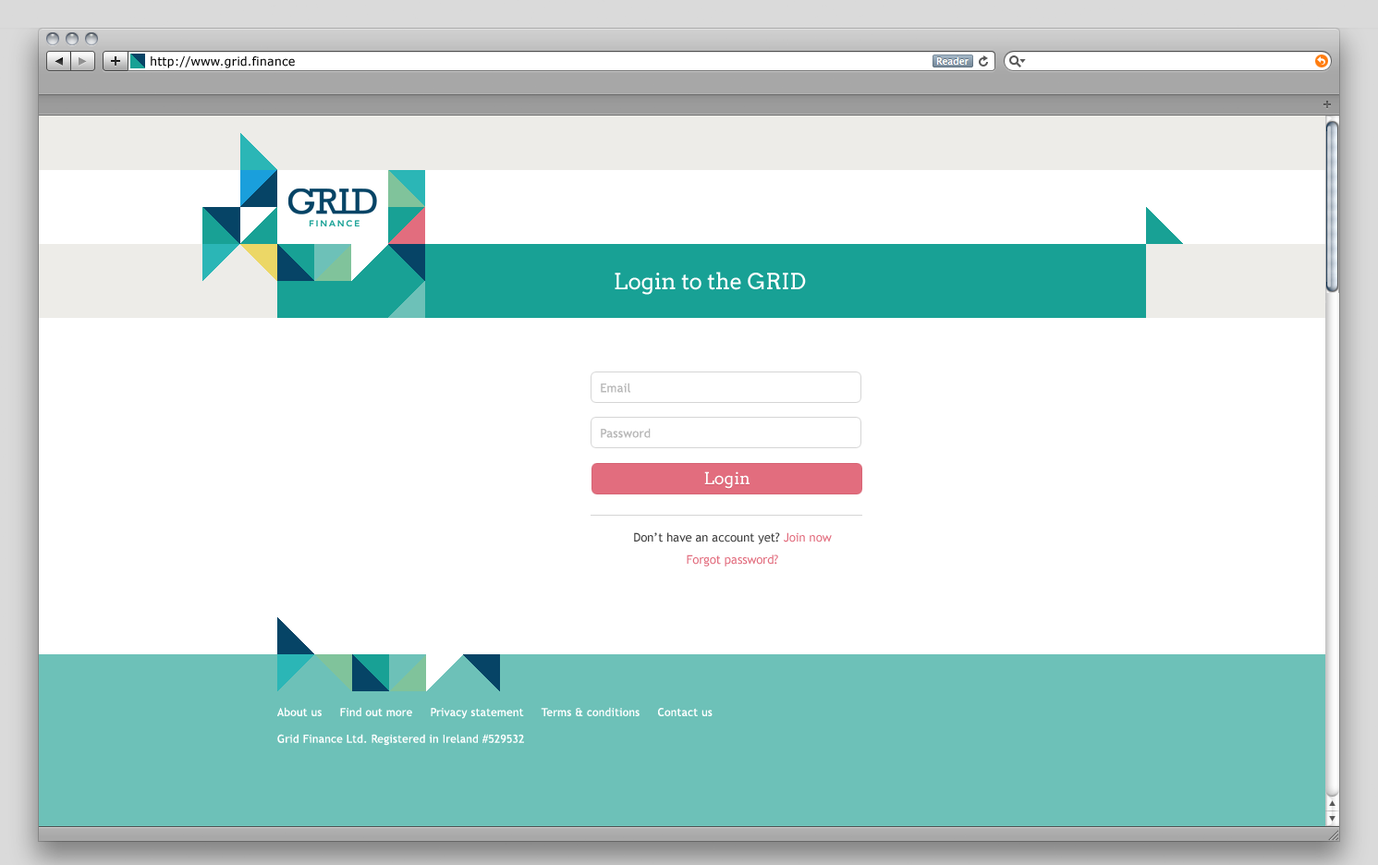
<style>
.page{position:relative;width:1378px;height:865px;background:#ffffff}
.page>*{position:absolute;margin:0}
.t1{font:12px "Verdana";color:#000000}
.t2{font:22.2px "Arvo";color:#ffffff}
.t3{font:12px "TrebuchetMS";letter-spacing:0.02em;color:#b9b9b9}
.t4{font:16.6px "Arvo";color:#ffffff}
.t5{font:12px/11.1px "TrebuchetMS";color:#414141}
.t6{font:12px/11.1px "TrebuchetMS";color:#e26d7e}
.t7{font:11.1px "TrebuchetMS";letter-spacing:0.02em;color:#ffffff}
</style>
<div class="page">
<p class="t1" style="left:151px;top:56px;width:144px;height:12px">http://www.grid.finance</p>
<p class="t2" style="left:615px;top:272px;width:191px;height:23px">Login to the GRID</p>
<p class="t3" style="left:601px;top:383px;width:29px;height:10px">Email</p>
<p class="t3" style="left:601px;top:428px;width:50px;height:10px">Password</p>
<p class="t4" style="left:704px;top:471px;width:46px;height:18px">Login</p>
<p class="t5" style="left:634px;top:532px;width:198px;height:35px;text-align:center">Don’t have an account yet? <span class="t6">Join now<br><br>Forgot password?</span></p>
<p class="t7" style="left:277px;top:707px;width:436px;height:39px">About us     Find out more     Privacy statement     Terms &amp; conditions     Contact us<br><br>Grid Finance Ltd. Registered in Ireland #529532</p>
</div>
